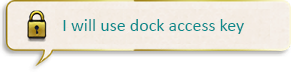
<style>
.page{position:relative;width:291px;height:72px}
.page>*{position:absolute;margin:0}
.t1{font:18px "Calibri";color:#0b8a8c}
</style>
<div class="page">
<p class="t1" style="left:63px;top:19px;width:181px;height:15px">I will use dock access key</p>
</div>
